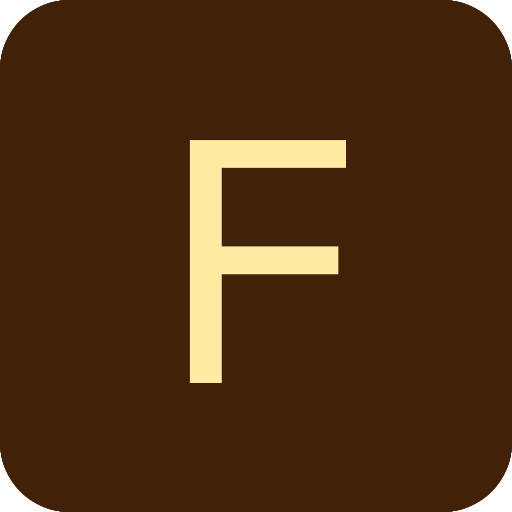
<style>
.page{position:relative;width:512px;height:512px;background:#412209}
.page>*{position:absolute;margin:0}
.t1{font:349px "AcuminConcept-Regular";color:#ffeba1}
</style>
<div class="page">
<p class="t1" style="left:189px;top:140px;width:157px;height:243px">F</p>
</div>
